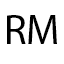
<style>
.page{position:relative;width:64px;height:64px;background:#ffffff}
.page>*{position:absolute;margin:0}
.t1{font:41.7px "MyriadPro-Regular";color:#000000}
</style>
<div class="page">
<p class="t1" style="left:7px;top:15px;width:50px;height:29px">RM</p>
</div>
